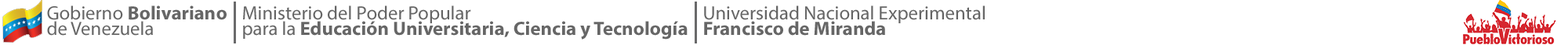
<style>
.page{position:relative;width:1568px;height:45px;background:#ffffff}
.page>*{position:absolute;margin:0}
.t1{font:19.4px/15.7px "MyriadPro-Regular";color:#666666}
.t2{font:19.4px/15.7px "MyriadPro-Regular";color:#666666;text-transform:uppercase}
.t3{font:19.4px/15.7px "MyriadPro-Bold";color:#666666}
</style>
<div class="page">
<p class="t1" style="left:47px;top:5px;width:180px;height:31px"><span class="t2">g</span>obierno <span class="t3">Bolivariano</span> <br>de Venezuela</p>
<p class="t3" style="left:243px;top:5px;width:445px;height:35px"><span class="t2">M</span><span class="t1">inisterio del Poder Popular<br>para la</span> Educación Universitaria, Ciencia y Tecnología</p>
<p class="t1" style="left:704px;top:5px;width:281px;height:31px"><span class="t2">U</span>niversidad Nacional Experimental<br><span class="t3">Francisco de Miranda</span></p>
</div>
